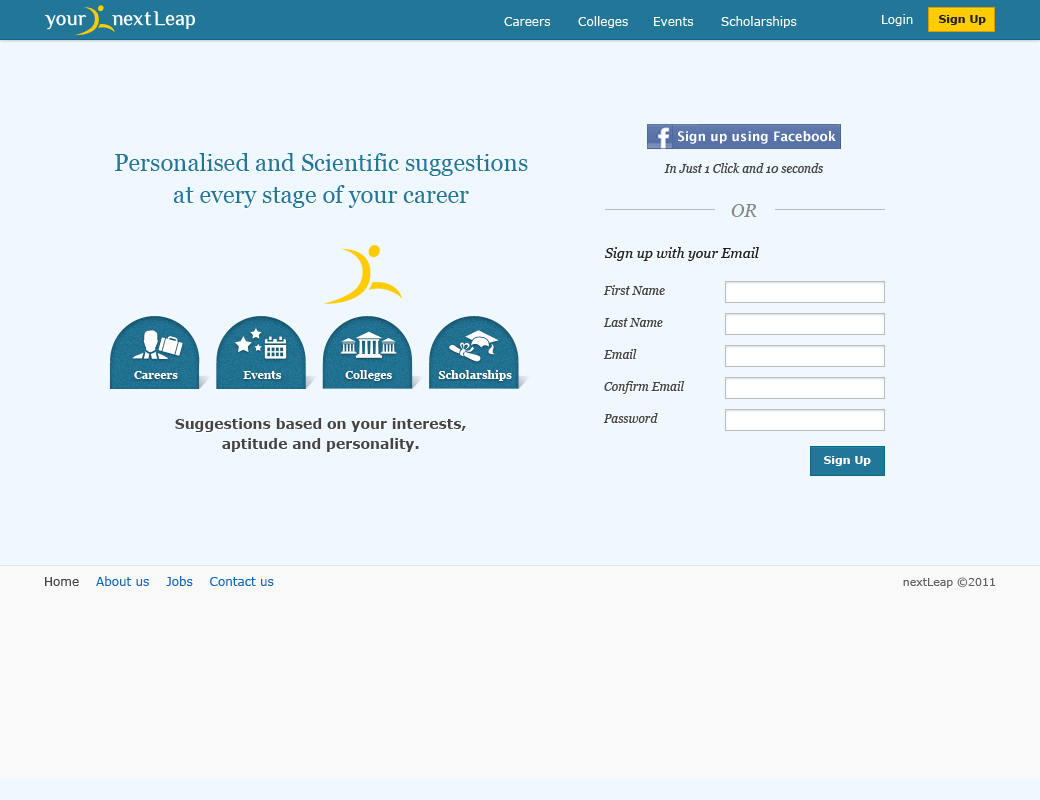
<style>
.page{position:relative;width:1040px;height:800px;background:#eff7ff}
.page>*{position:absolute;margin:0}
.t1{font:12px "Verdana";color:#ffffff}
.t2{font:11px "Verdana-Bold";color:#222222}
.t3{font:13px "LucidaGrande-Bold";color:#ffffff}
.t4{font:24px/32px "Georgia";color:#227799}
.t5{font:12px "Georgia-Italic";color:#444444}
.t6{font:18px "Georgia-Italic";color:#888888}
.t7{font:14px "Georgia-Italic";color:#222222}
.t8{font:11px "Georgia-Bold";color:#fefefe}
.t9{font:14px/20px "Verdana-Bold";color:#444444}
.t10{font:11px "Verdana-Bold";color:#ffffff}
.t11{font:12px "Verdana";color:#1166bb}
.t12{font:12px "Verdana";color:#444444}
.t13{font:11px "Verdana";color:#606060}
</style>
<div class="page">
<p class="t1" style="left:504px;top:17px;width:47px;height:9px">Careers</p>
<p class="t1" style="left:578px;top:16px;width:50px;height:12px">Colleges</p>
<p class="t1" style="left:654px;top:17px;width:40px;height:9px">Events</p>
<p class="t1" style="left:721px;top:16px;width:76px;height:12px">Scholarships</p>
<p class="t1" style="left:882px;top:14px;width:31px;height:12px">Login</p>
<p class="t2" style="left:939px;top:15px;width:47px;height:10px">Sign Up</p>
<p class="t3" style="left:678px;top:131px;width:158px;height:13px">Sign up using Facebook</p>
<p class="t4" style="left:115px;top:153px;width:413px;height:55px;text-align:center">Personalised and Scientific suggestions<br>at every stage of your career</p>
<p class="t5" style="left:664px;top:163px;width:159px;height:10px">In Just 1 Click and 10 seconds</p>
<p class="t6" style="left:731px;top:204px;width:26px;height:13px">OR</p>
<p class="t7" style="left:604px;top:247px;width:155px;height:14px">Sign up with your Email</p>
<p class="t5" style="left:603px;top:285px;width:62px;height:10px">First Name</p>
<p class="t5" style="left:603px;top:318px;width:60px;height:9px">Last Name</p>
<p class="t5" style="left:603px;top:349px;width:34px;height:10px">Email</p>
<p class="t8" style="left:134px;top:371px;width:44px;height:8px">Careers</p>
<p class="t8" style="left:243px;top:371px;width:38px;height:8px">Events</p>
<p class="t8" style="left:345px;top:370px;width:47px;height:11px">Colleges</p>
<p class="t8" style="left:438px;top:370px;width:74px;height:11px">Scholarships</p>
<p class="t5" style="left:604px;top:381px;width:81px;height:13px">Confirm Email</p>
<p class="t5" style="left:603px;top:413px;width:55px;height:10px">Password</p>
<p class="t9" style="left:175px;top:418px;width:291px;height:34px;text-align:center">Suggestions based on your interests, <br>aptitude and personality.</p>
<p class="t10" style="left:824px;top:456px;width:47px;height:10px">Sign Up</p>
<p class="t11" style="left:45px;top:576px;width:229px;height:10px"><span class="t12">Home</span>    About us    Jobs    Contact us</p>
<p class="t13" style="left:903px;top:577px;width:92px;height:11px">nextLeap ©2011</p>
</div>
